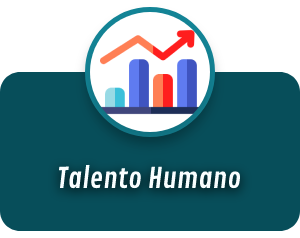
<style>
.page{position:relative;width:300px;height:238px;background:#074e5a}
.page>*{position:absolute;margin:0}
.t1{font:28px "ContrailOne-Regular";color:#f9feff}
</style>
<div class="page">
<p class="t1" style="left:58px;top:164px;width:182px;height:25px">Talento Humano</p>
</div>
